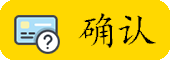
<style>
.page{position:relative;width:170px;height:60px;background:#ffd800}
.page>*{position:absolute;margin:0}
.t1{font:40px "¿¬Ìå";color:#000000}
</style>
<div class="page">
<p class="t1" style="left:78px;top:13px;width:78px;height:35px">确认</p>
</div>
